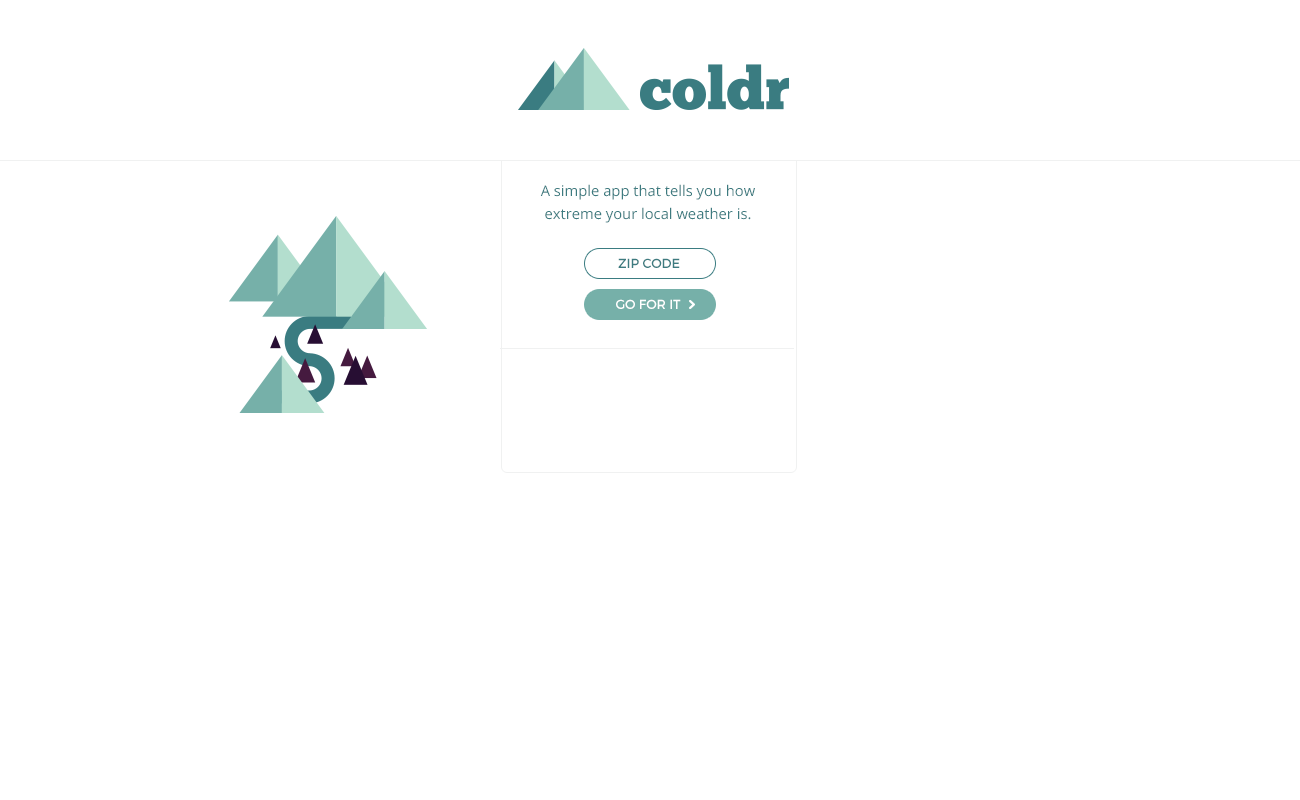
<style>
.page{position:relative;width:1300px;height:800px;background:#ffffff}
.page>*{position:absolute;margin:0}
.t1{font:14.7px/23.8px "OpenSans";color:#3d7b80}
.t2{font:13.3px "Montserrat-Regular";color:#3d7b80;scale:0.97 1}
.t3{font:13.3px "Montserrat-Regular";color:#ffffff;scale:0.97 1}
</style>
<div class="page">
<p class="t1" style="left:540px;top:184px;width:215px;height:39px;text-align:center">A simple app that tells you how extreme your local weather is.</p>
<p class="t2" style="left:618px;top:258px;width:62px;height:10px">ZIP CODE</p>
<p class="t3" style="left:616px;top:299px;width:65px;height:10px">GO FOR IT</p>
</div>
